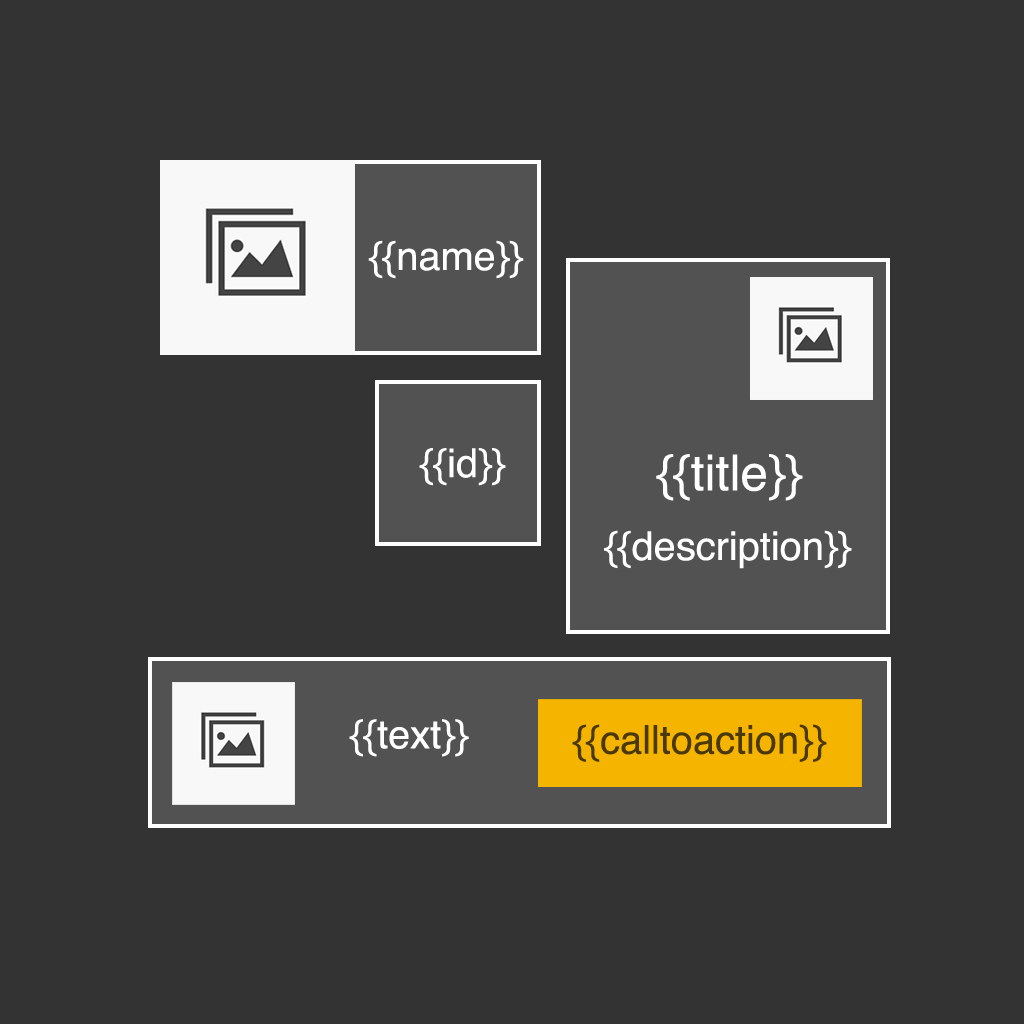
<style>
.page{position:relative;width:1024px;height:1024px;background:#333333}
.page>*{position:absolute;margin:0}
.t1{font:39.8px "Helvetica";color:#ffffff}
.t2{font:49.7px "Helvetica";color:#ffffff}
.t3{font:39.8px "Helvetica";color:#4a3807}
</style>
<div class="page">
<p class="t1" style="left:368px;top:240px;width:156px;height:39px">{{name}}</p>
<p class="t1" style="left:419px;top:448px;width:87px;height:38px">{{id}}</p>
<p class="t2" style="left:656px;top:454px;width:147px;height:47px">{{title}}</p>
<p class="t1" style="left:604px;top:530px;width:248px;height:39px">{{description}}</p>
<p class="t1" style="left:349px;top:719px;width:120px;height:38px">{{text}}</p>
<p class="t3" style="left:572px;top:724px;width:255px;height:38px">{{calltoaction}}</p>
</div>
